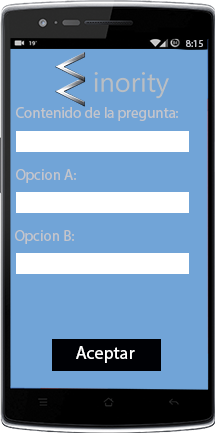
<style>
.page{position:relative;width:215px;height:433px;background:#71a4d7}
.page>*{position:absolute;margin:0}
.t1{font:10px "MyriadPro-Regular";color:#c4c5cb}
.t2{font:15px "MyriadPro-Regular";color:#c4c5cb}
.t3{font:18px "MyriadPro-Regular";color:#ffffff}
</style>
<div class="page">
<p class="t1" style="left:186px;top:40px;width:17px;height:7px">8:15</p>
<p class="t2" style="left:16px;top:107px;width:162px;height:14px">Contenido de la pregunta:</p>
<p class="t2" style="left:16px;top:169px;width:60px;height:14px">Opcion A:</p>
<p class="t2" style="left:15px;top:230px;width:59px;height:14px">Opcion B:</p>
<p class="t3" style="left:76px;top:346px;width:59px;height:17px">Aceptar</p>
</div>
